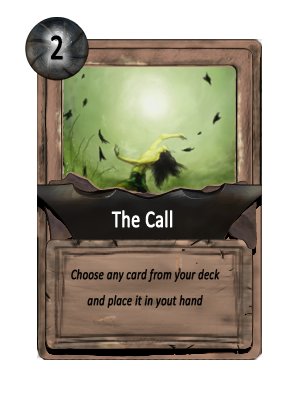
<style>
.page{position:relative;width:300px;height:400px;background:#ffffff}
.page>*{position:absolute;margin:0}
.t1{font:36px "Calibri";color:#000000;font-weight:bold;scale:0.75 1}
.t2{font:24px "Calibri";color:#ffffff;font-weight:bold;scale:0.75 1}
.t3{font:14.4px/26px "Calibri-Italic";color:#000000;font-weight:bold;scale:0.75 1}
</style>
<div class="page">
<p class="t1" style="left:51px;top:35px;width:12px;height:25px">2</p>
<p class="t2" style="left:111px;top:210px;width:62px;height:18px">The Call</p>
<p class="t3" style="left:71px;top:268px;width:149px;height:40px;text-align:center">Choose any card from your deck<br>and place it in yout hand</p>
</div>
